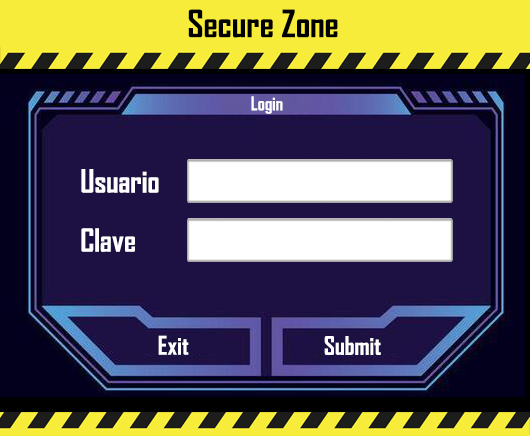
<style>
.page{position:relative;width:530px;height:436px;background:#1d1143}
.page>*{position:absolute;margin:0}
.t1{font:36px "AgencyFB-Bold";color:#000000}
.t2{font:18.3px "AgencyFB-Bold";color:#ffffff}
.t3{font:30.5px "AgencyFB-Bold";color:#ffffff}
.t4{font:24.4px "AgencyFB-Bold";color:#ffffff}
</style>
<div class="page">
<p class="t1" style="left:188px;top:9px;width:150px;height:29px">Secure Zone</p>
<p class="t2" style="left:251px;top:96px;width:32px;height:18px">Login</p>
<p class="t3" style="left:81px;top:169px;width:78px;height:24px">Usuario</p>
<p class="t3" style="left:81px;top:228px;width:54px;height:24px">Clave</p>
<p class="t4" style="left:158px;top:335px;width:31px;height:20px">Exit</p>
<p class="t4" style="left:324px;top:336px;width:57px;height:19px">Submit</p>
</div>
